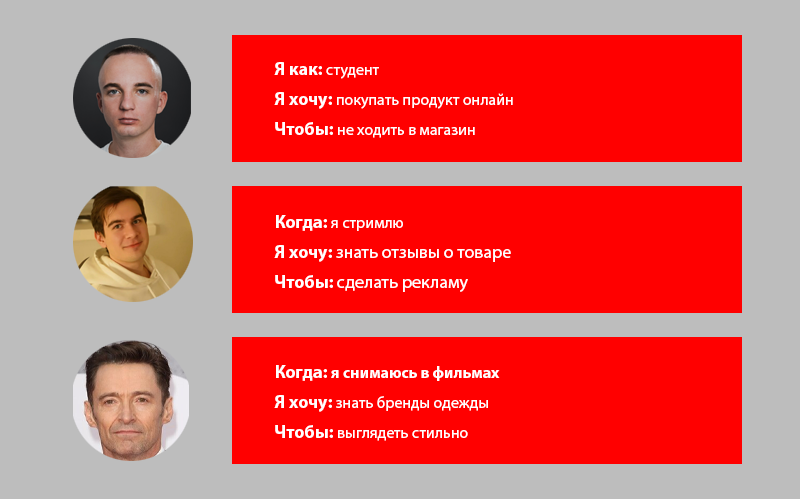
<style>
.page{position:relative;width:800px;height:500px;background:#ff0000}
.page>*{position:absolute;margin:0}
.t1{font:16px/30px "MyriadPro-Regular";color:#ffffff}
.t2{font:18px/30px "MyriadPro-Bold";color:#ffffff}
.t3{font:18px/30px "MyriadPro-Regular";color:#ffffff}
.t4{font:16px/30px "MyriadPro-Bold";color:#ffffff}
</style>
<div class="page">
<p class="t1" style="left:274px;top:62px;width:239px;height:76px"><span class="t2">Я как: </span>студент<br><span class="t2">Я хочу: </span>покупать продукт онлайн<br><span class="t2">Чтобы: </span>не ходить в магазин</p>
<p class="t3" style="left:274px;top:215px;width:237px;height:77px"><span class="t2">Когда: </span><span class="t1">я стримлю<br></span><span class="t2">Я хочу: </span>знать отзывы о товаре<br><span class="t2">Чтобы: </span>сделать рекламу</p>
<p class="t4" style="left:274px;top:365px;width:226px;height:76px"><span class="t2">Когда: </span>я снимаюсь в фильмах<br><span class="t2">Я хочу: </span><span class="t1">знать бренды одежды<br></span><span class="t2">Чтобы: </span><span class="t1">выглядеть стильно</span></p>
</div>
